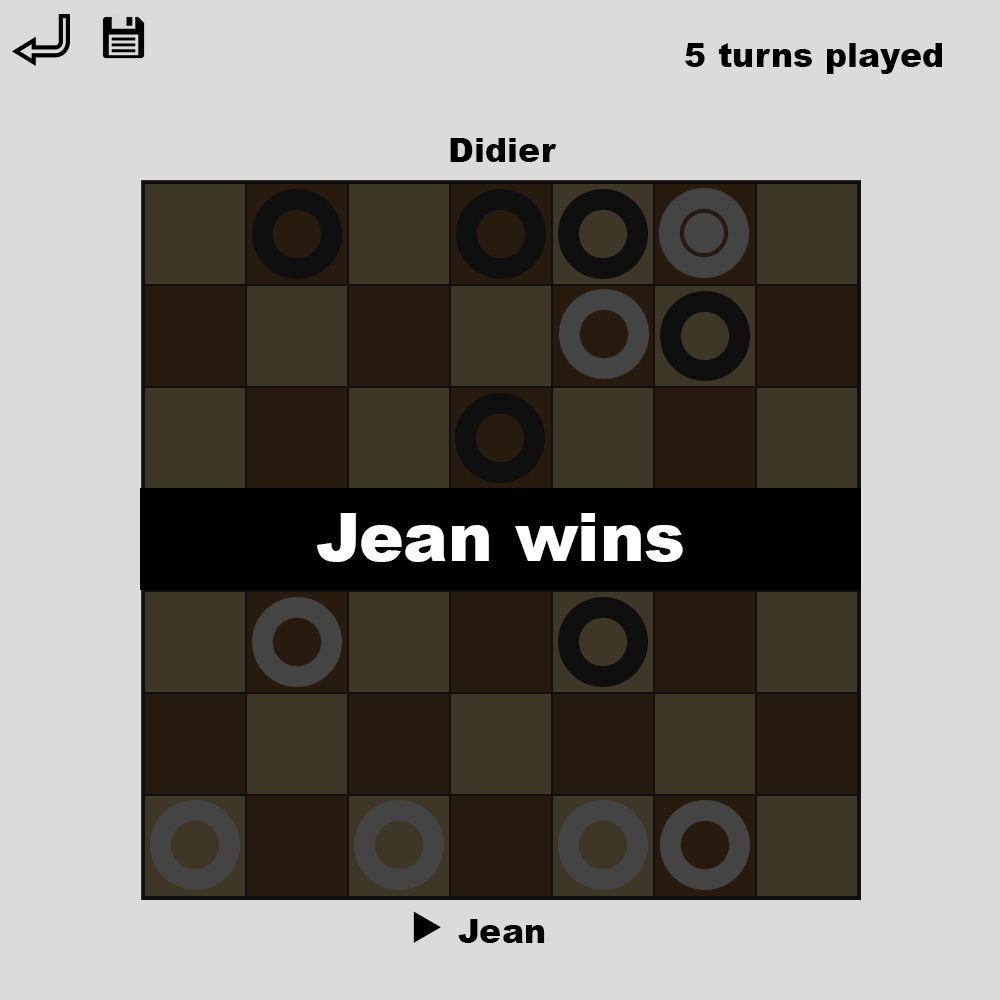
<style>
.page{position:relative;width:1000px;height:1000px;background:#dbdbdb}
.page>*{position:absolute;margin:0}
.t1{font:33.3px "Arial-Black";color:#000000}
.t2{font:66.7px "Arial-Black";color:#ffffff}
</style>
<div class="page">
<p class="t1" style="left:685px;top:43px;width:257px;height:31px">5 turns played</p>
<p class="t1" style="left:450px;top:138px;width:107px;height:24px">Didier</p>
<p class="t2" style="left:317px;top:513px;width:366px;height:49px">Jean wins</p>
<p class="t1" style="left:458px;top:919px;width:87px;height:24px">Jean</p>
</div>
